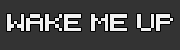
<style>
.page{position:relative;width:180px;height:50px;background:#333333}
.page>*{position:absolute;margin:0}
.t1{font:23.5px "RetroComputer";color:#f2f2f2}
</style>
<div class="page">
<p class="t1" style="left:7px;top:14px;width:166px;height:17px">WAKE ME UP</p>
</div>
